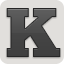
<style>
.page{position:relative;width:64px;height:64px;background:#e1dfdc}
.page>*{position:absolute;margin:0}
.t1{font:70px "ChunkFive";letter-spacing:0.1em;color:#444444}
</style>
<div class="page">
<p class="t1" style="left:6px;top:8px;width:55px;height:49px">K</p>
</div>
